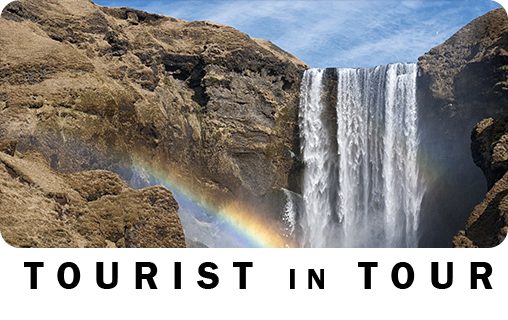
<style>
.page{position:relative;width:508px;height:320px}
.page>*{position:absolute;margin:0}
.t1{font:40px "FranklinGothic-Demi";letter-spacing:0.32em;color:#000000}
.t2{font:30px "FranklinGothic-Demi";letter-spacing:0.32em;color:#000000}
</style>
<div class="page">
<p class="t1" style="left:24px;top:262px;width:469px;height:27px">TOURIST <span class="t2">IN</span> TOUR</p>
</div>
